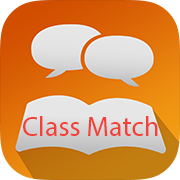
<style>
.page{position:relative;width:180px;height:180px}
.page>*{position:absolute;margin:0}
.t1{font:28px "MyriadPro-Regular";color:#f24138}
</style>
<div class="page">
<p class="t1" style="left:23px;top:116px;width:135px;height:20px">Class Match</p>
</div>
